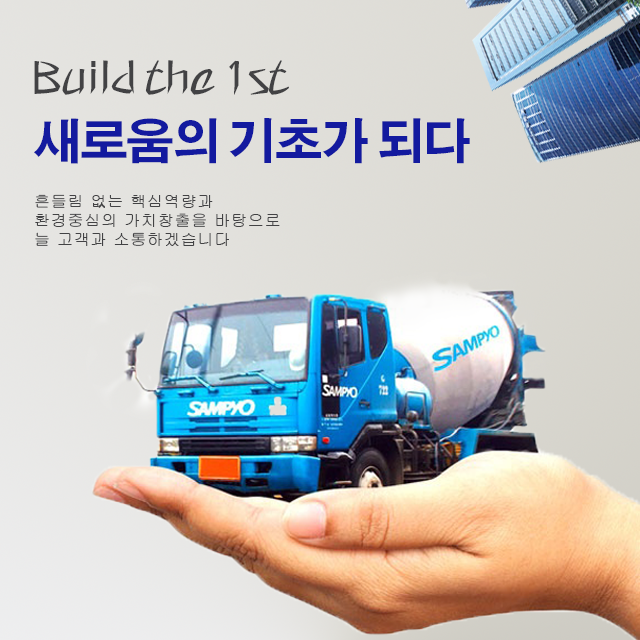
<style>
.page{position:relative;width:640px;height:640px}
.page>*{position:absolute;margin:0}
.t1{font:46.1px "HYmprL";letter-spacing:-0.09em;color:#424244;scale:0.96 1}
.t2{font:48px "AdobeGothicStd-Bold";letter-spacing:-0.03em;color:#131a9f}
.t3{font:16px "Gulim";letter-spacing:0.05em;color:#424244}
</style>
<div class="page">
<p class="t1" style="left:34px;top:60px;width:255px;height:35px">Build the 1st</p>
<p class="t2" style="left:34px;top:118px;width:436px;height:46px">새로움의 기초가 되다</p>
<p class="t3" style="left:35px;top:194px;width:245px;height:52px">흔들림 없는 핵심역량과<br>환경중심의 가치창출을 바탕으로<br>늘 고객과 소통하겠습니다</p>
</div>
